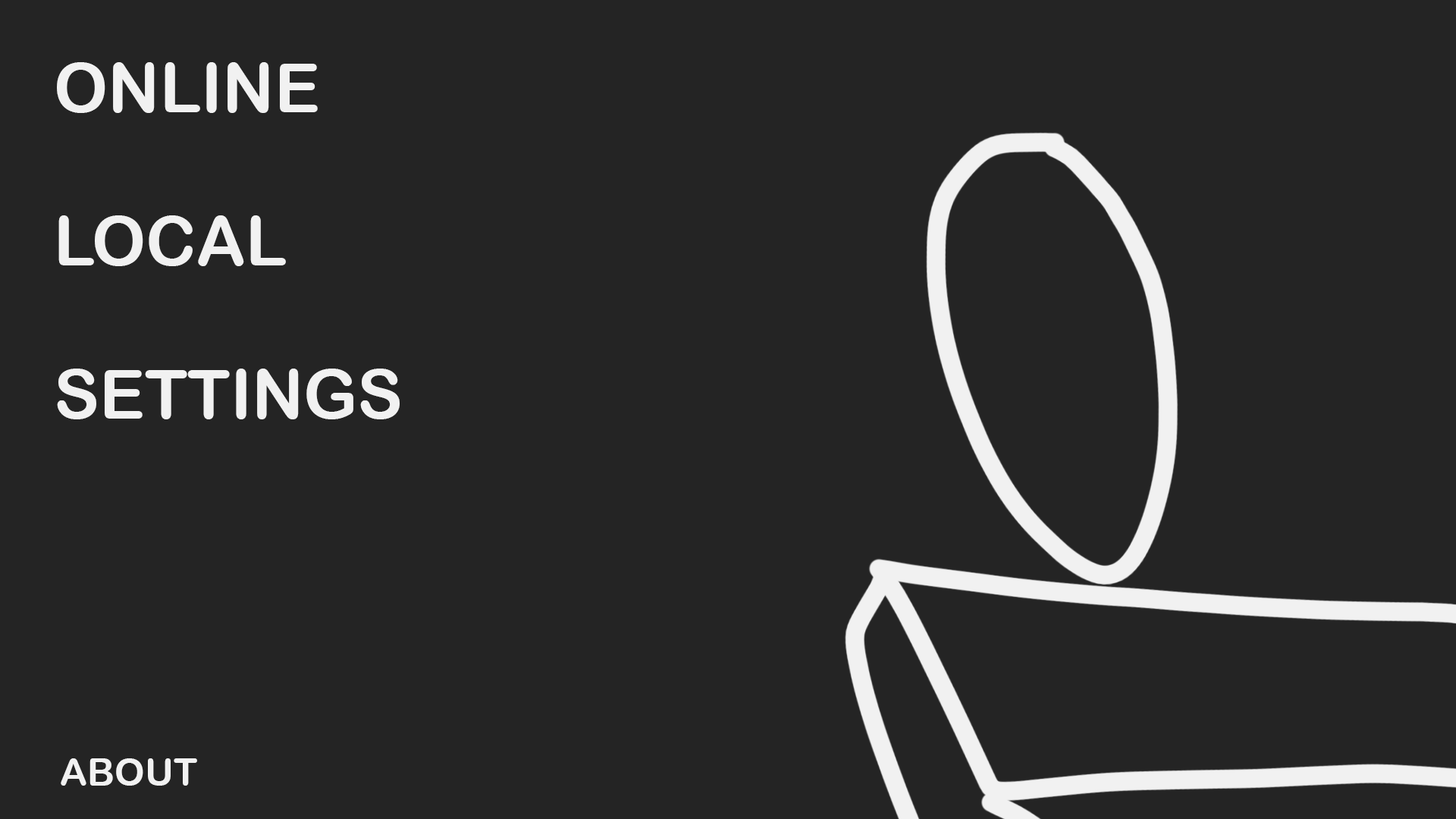
<style>
.page{position:relative;width:1456px;height:819px;background:#242424}
.page>*{position:absolute;margin:0}
.t1{font:68.2px "ArialRoundedMTBold";color:#f1f1f1}
.t2{font:37.9px "ArialRoundedMTBold";color:#f1f1f1}
</style>
<div class="page">
<p class="t1" style="left:57px;top:62px;width:261px;height:51px">ONLINE</p>
<p class="t1" style="left:58px;top:215px;width:228px;height:51px">LOCAL</p>
<p class="t1" style="left:57px;top:369px;width:343px;height:50px">SETTINGS</p>
<p class="t2" style="left:61px;top:758px;width:136px;height:28px">ABOUT</p>
</div>
